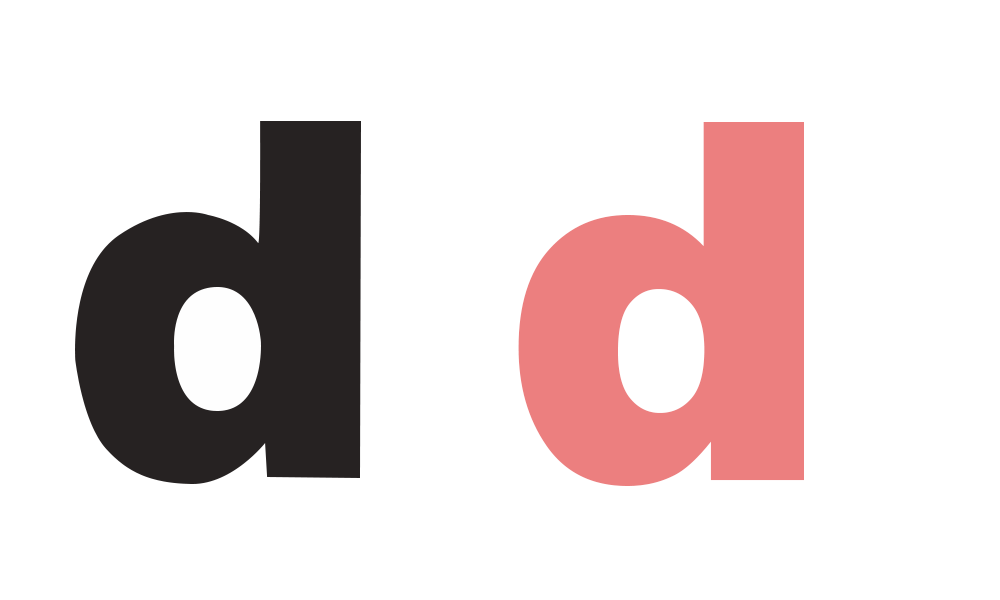
<style>
.page{position:relative;width:1000px;height:600px;background:#ffffff}
.page>*{position:absolute;margin:0}
.t1{font:500px "Arial-Black";color:#ec7f7f}
</style>
<div class="page">
<p class="t1" style="left:518px;top:122px;width:286px;height:364px">d</p>
</div>
